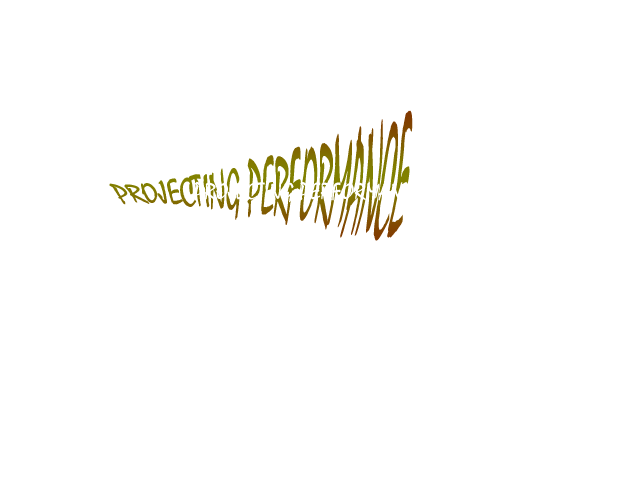
<style>
.page{position:relative;width:640px;height:480px;background:#ffffff}
.page>*{position:absolute;margin:0}
.t1{font:30px "Mistral"}
.t2{font:24px "Mistral";color:#ffffff}
</style>
<div class="page">
<p class="t1" style="left:109px;top:110px;width:304px;height:131px">PROJECTING PERFORMANCE</p>
<p class="t2" style="left:194px;top:181px;width:231px;height:22px">PROJECTING PERFORMANCE</p>
</div>
